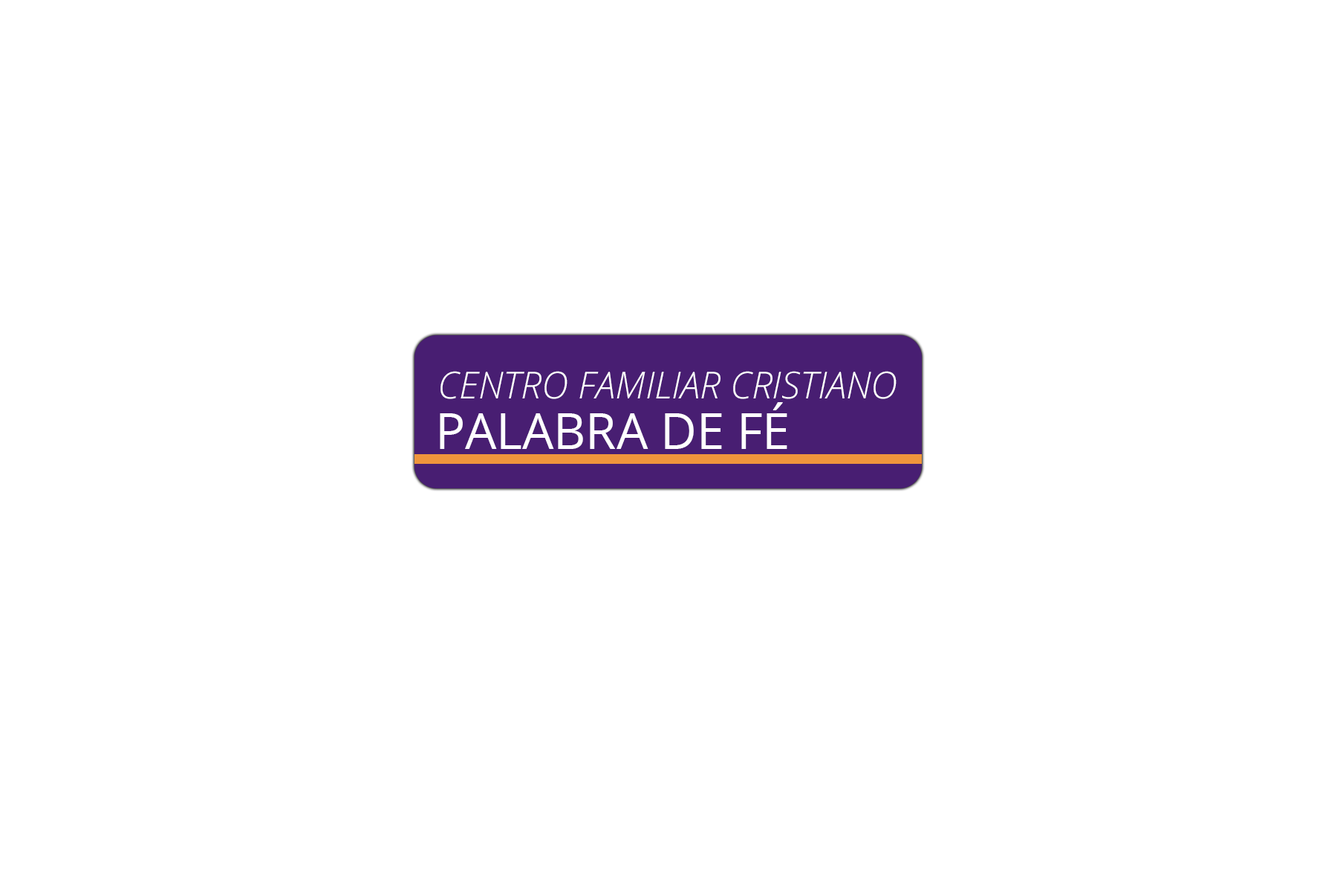
<style>
.page{position:relative;width:1337px;height:892px;background:#ffffff}
.page>*{position:absolute;margin:0}
.t1{font:37.2px "OpenSansLight-Italic";color:#ffffff}
.t2{font:49.5px "OpenSans";color:#ffffff}
</style>
<div class="page">
<p class="t1" style="left:441px;top:371px;width:456px;height:28px">CENTRO FAMILIAR CRISTIANO</p>
<p class="t2" style="left:440px;top:402px;width:348px;height:47px">PALABRA DE FÉ</p>
</div>
